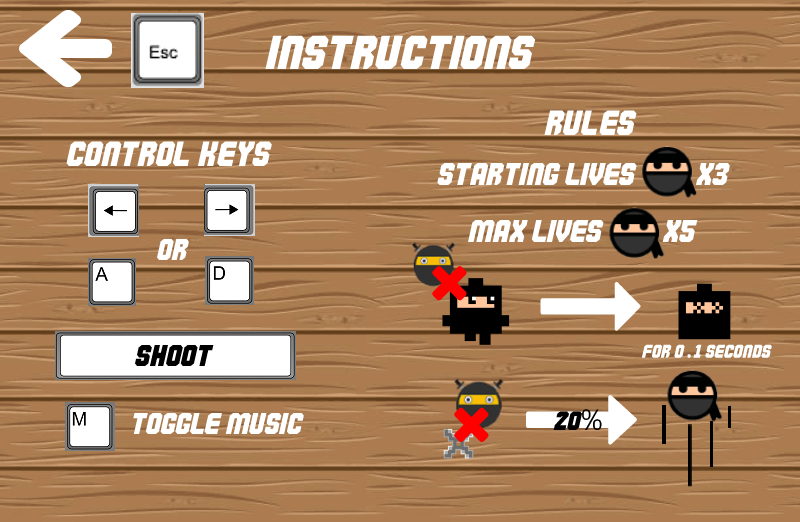
<style>
.page{position:relative;width:800px;height:522px}
.page>*{position:absolute;margin:0}
.t1{font:47.6px "Commando";color:#ffffff}
.t2{font:35px "Commando";color:#ffffff}
.t3{font:31.7px "Commando";color:#ffffff}
.t4{font:30px "Commando";color:#ffffff}
.t5{font:30px "Commando";color:#000000}
.t6{font:18.5px "Commando";color:#ffffff}
.t7{font:32.4px "Comme-Regular";color:#ffffff}
.t8{font:26.4px "Commando";color:#010101}
.t9{font:28.5px "Comme-Regular";color:#010101}
</style>
<div class="page">
<p class="t1" style="left:265px;top:35px;width:271px;height:34px">Instructions</p>
<p class="t2" style="left:544px;top:110px;width:93px;height:25px">RULES</p>
<p class="t2" style="left:66px;top:141px;width:206px;height:25px">cONTROL KEYS</p>
<p class="t3" style="left:437px;top:163px;width:293px;height:22px">starting lives:        x3</p>
<p class="t3" style="left:468px;top:220px;width:230px;height:22px">MAX lives:        x5</p>
<p class="t4" style="left:157px;top:239px;width:32px;height:21px">or</p>
<p class="t5" style="left:135px;top:345px;width:79px;height:21px">Shoot</p>
<p class="t6" style="left:641px;top:344px;width:131px;height:14px">For 0<span class="t7">.</span>1 seconds</p>
<p class="t4" style="left:133px;top:413px;width:171px;height:21px">\Toggle music</p>
<p class="t8" style="left:553px;top:409px;width:49px;height:21px">20<span class="t9">%</span></p>
</div>
